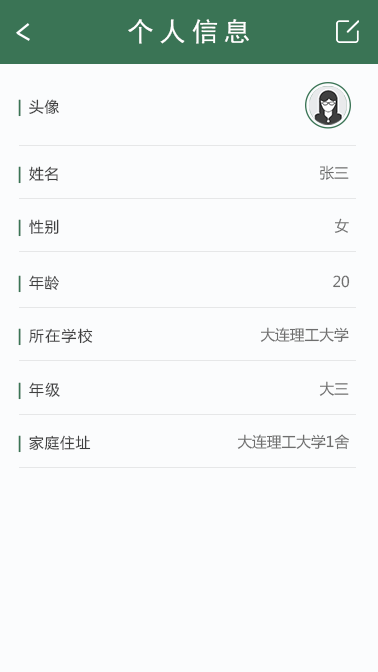
<style>
.page{position:relative;width:378px;height:672px;background:#fbfcfd}
.page>*{position:absolute;margin:0}
.t1{font:26.7px "SimHei";letter-spacing:0.2em;color:#ffffff}
.t2{font:14.7px "MicrosoftYaHei";letter-spacing:0.05em;color:#3f3f3f}
.t3{font:14.7px "MicrosoftYaHei";letter-spacing:0.1em;color:#3a7455;font-weight:bold}
.t4{font:14.7px "MicrosoftYaHei";color:#6e6e6e}
.t5{font:14.7px "MicrosoftYaHei";letter-spacing:0.1em;color:#3f3f3f}
</style>
<div class="page">
<p class="t1" style="left:128px;top:19px;width:121px;height:25px">个人信息</p>
<p class="t2" style="left:18px;top:99px;width:41px;height:18px"><span class="t3">| </span>头像</p>
<p class="t2" style="left:18px;top:166px;width:40px;height:18px"><span class="t3">| </span>姓名</p>
<p class="t4" style="left:320px;top:165px;width:29px;height:15px">张三</p>
<p class="t2" style="left:18px;top:219px;width:41px;height:18px"><span class="t3">| </span>性别</p>
<p class="t4" style="left:334px;top:218px;width:15px;height:15px">女</p>
<p class="t2" style="left:18px;top:275px;width:41px;height:18px"><span class="t3">| </span>年龄</p>
<p class="t4" style="left:333px;top:275px;width:17px;height:13px">20</p>
<p class="t5" style="left:18px;top:328px;width:75px;height:18px"><span class="t3">|</span> 所在学校</p>
<p class="t4" style="left:260px;top:327px;width:89px;height:15px">大连理工大学</p>
<p class="t5" style="left:18px;top:382px;width:42px;height:18px"><span class="t3">|</span> 年级</p>
<p class="t4" style="left:319px;top:381px;width:30px;height:15px">大三</p>
<p class="t2" style="left:18px;top:435px;width:73px;height:18px"><span class="t3">| </span>家庭住址</p>
<p class="t4" style="left:237px;top:434px;width:112px;height:16px">大连理工大学1舍</p>
</div>
